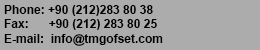
<style>
.page{position:relative;width:260px;height:50px;background:#acacac}
.page>*{position:absolute;margin:0}
.t1{font:12px "Arial-BoldMT";color:#000000}
</style>
<div class="page">
<p class="t1" style="left:4px;top:5px;width:159px;height:41px">Phone: +90 (212)283 80 38<br>Fax:      +90 (212) 283 80 25<br>E-mail:  info@tmgofset.com</p>
</div>
